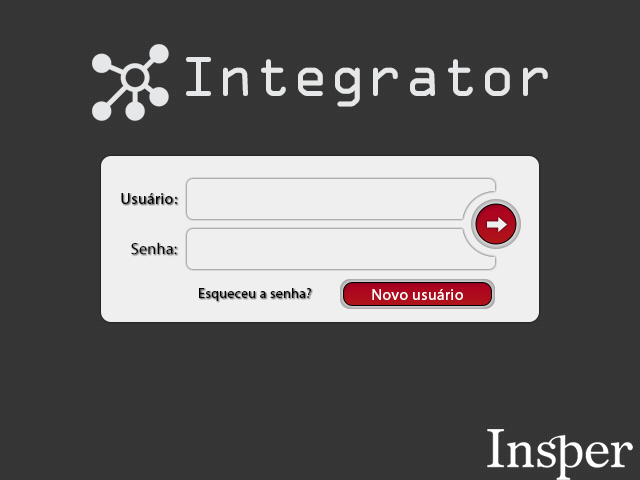
<style>
.page{position:relative;width:640px;height:480px;background:#373737}
.page>*{position:absolute;margin:0}
.t1{font:60px "OCRAExtended";letter-spacing:0.02em;color:#e8e1e1}
.t2{font:16px "MyriadPro-Regular";letter-spacing:0.02em;color:#000000}
.t3{font:14px "MyriadPro-Regular";letter-spacing:0.02em;color:#000000}
.t4{font:16px "MyriadPro-Regular";letter-spacing:0.02em;color:#ffffff}
</style>
<div class="page">
<p class="t1" style="left:186px;top:57px;width:362px;height:50px">Integrator</p>
<p class="t2" style="left:121px;top:193px;width:56px;height:11px">Usuário:</p>
<p class="t2" style="left:131px;top:242px;width:46px;height:13px">Senha:</p>
<p class="t3" style="left:199px;top:288px;width:112px;height:13px">Esqueceu a senha?</p>
<p class="t4" style="left:372px;top:289px;width:91px;height:11px">Novo usuário</p>
</div>
